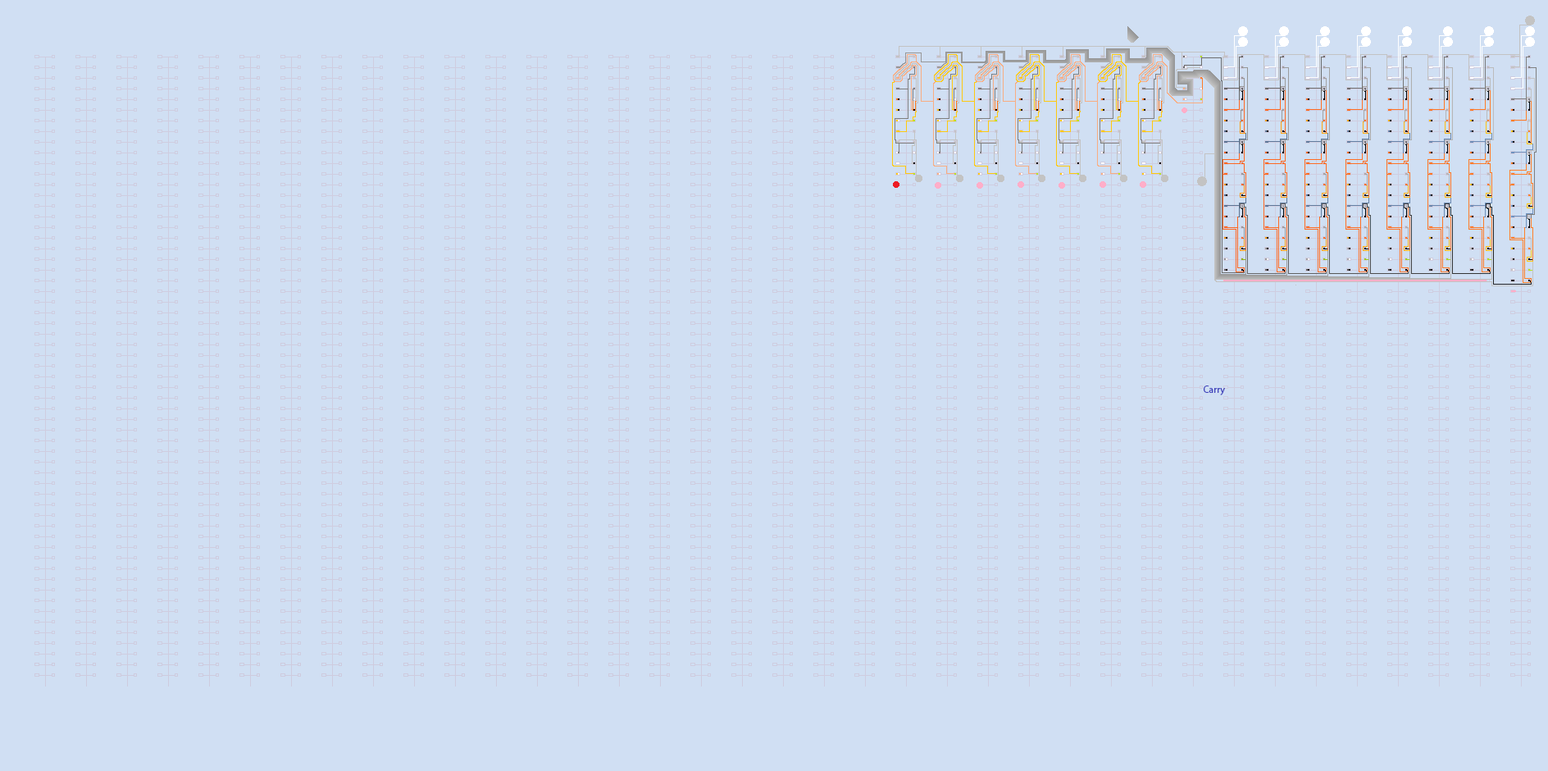
<style>
.page{position:relative;width:1548px;height:771px;background:#d0dff3}
.page>*{position:absolute;margin:0}
.t1{font:9.8px "MyriadPro-Regular";color:#4043bc}
</style>
<div class="page">
<p class="t1" style="left:1203px;top:385px;width:22px;height:10px">Carry</p>
</div>
